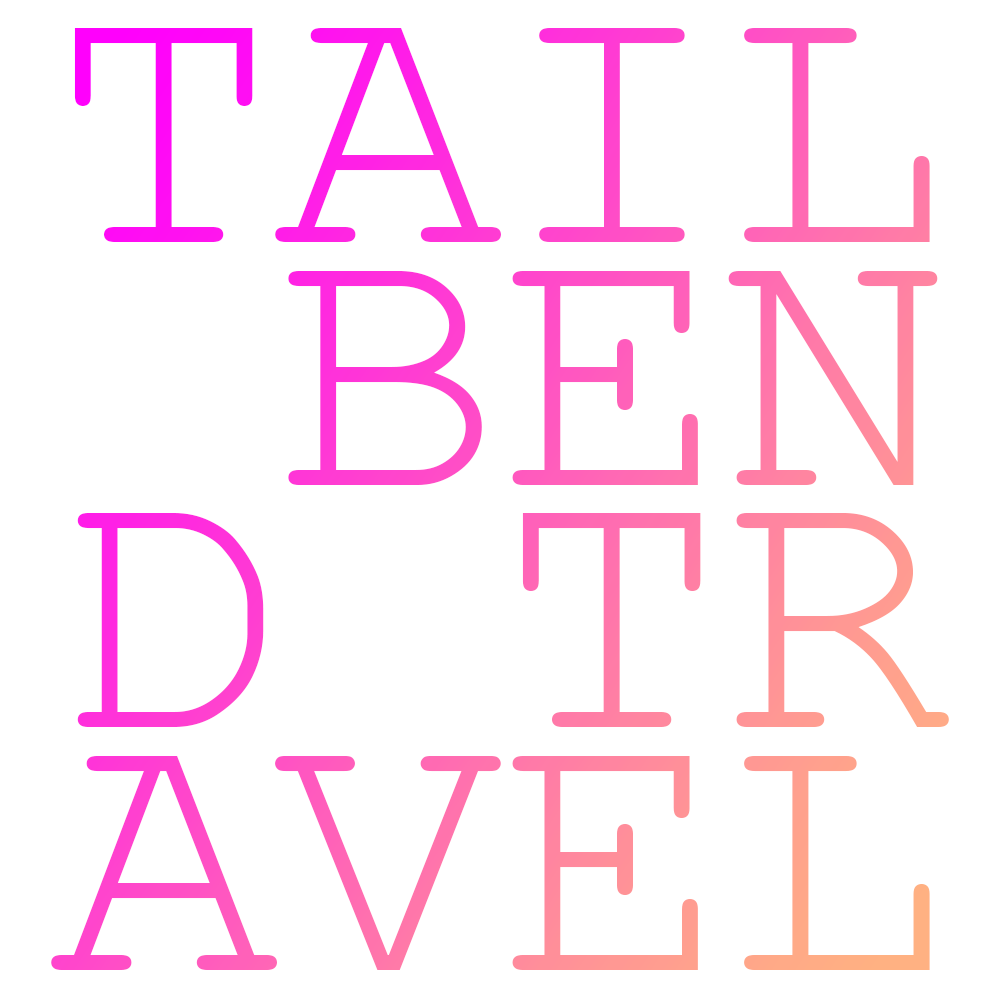
<style>
.page{position:relative;width:1000px;height:1000px;background:#ffffff}
.page>*{position:absolute;margin:0}
.t1{font:374.1px/242.7px "CourierNewPSMT";letter-spacing:-0.02em;scale:1.03 1}
</style>
<div class="page">
<p class="t1" style="left:51px;top:28px;width:898px;height:942px;text-align:center">TAIL<br> BEN<br>D TR<br>AVEL</p>
</div>
